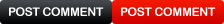
<style>
.page{position:relative;width:224px;height:24px}
.page>*{position:absolute;margin:0}
.t1{font:12px "ArialRoundedMTBold";letter-spacing:-0.025em;color:#ffffff}
</style>
<div class="page">
<p class="t1" style="left:9px;top:7px;width:95px;height:9px">POST COMMENT</p>
<p class="t1" style="left:121px;top:7px;width:95px;height:9px">POST COMMENT</p>
</div>
